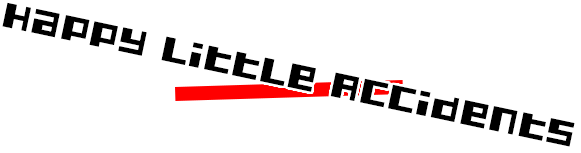
<style>
.page{position:relative;width:581px;height:153px;background:#ffffff}
.page>*{position:absolute;margin:0}
.t1{font:36px "Dusty";letter-spacing:0.015em;color:#000000}
</style>
<div class="page">
<p class="t1" style="left:2px;top:2px;width:573px;height:145px;rotate:12deg">Happy Little Accidents</p>
</div>
